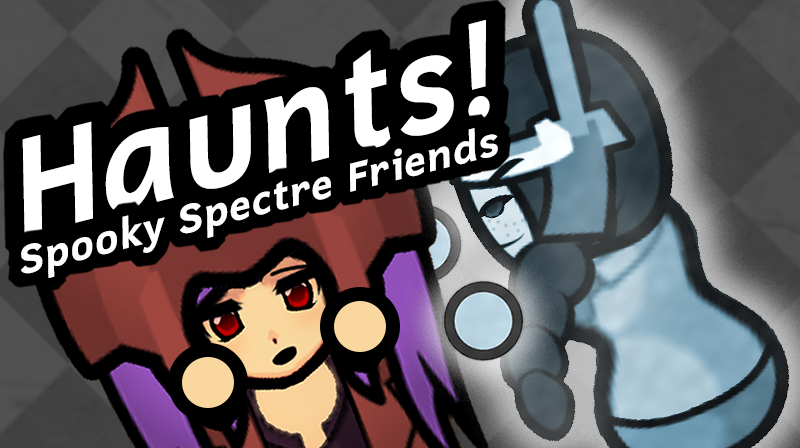
<style>
.page{position:relative;width:800px;height:448px;background:#000000}
.page>*{position:absolute;margin:0}
.t1{font:142.6px "Cadman-Bold";color:#ffffff;scale:0.91 1}
.t2{font:41.1px "Cadman-Bold";color:#ffffff}
</style>
<div class="page">
<p class="t1" style="left:22px;top:20px;width:468px;height:216px;rotate:-14deg">Haunts!</p>
<p class="t2" style="left:21px;top:128px;width:477px;height:150px;rotate:-14deg">Spooky Spectre Friends</p>
</div>
